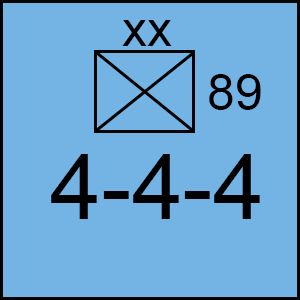
<style>
.page{position:relative;width:300px;height:300px;background:#74b4e4}
.page>*{position:absolute;margin:0}
.t1{font:50px "ArialMT";color:#000000}
.t2{font:91.7px "ArialMT";color:#000000}
</style>
<div class="page">
<p class="t1" style="left:122px;top:20px;width:50px;height:26px">xx</p>
<p class="t1" style="left:209px;top:74px;width:52px;height:36px">89</p>
<p class="t2" style="left:51px;top:154px;width:209px;height:65px">4-4-4</p>
</div>
